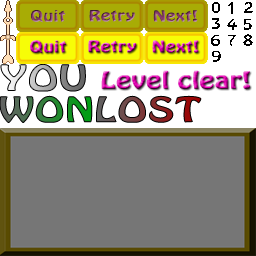
<style>
.page{position:relative;width:256px;height:256px;background:#767676}
.page>*{position:absolute;margin:0}
.t1{font:13.4px "HoboStd";letter-spacing:0.02em;scale:1.33 1}
.t2{font:14.2px "HoboStd";letter-spacing:0.02em;scale:1.33 1}
.t3{font:31.8px "HoboStd";letter-spacing:0.02em;scale:1.32 1}
.t4{font:20.9px "HoboStd";letter-spacing:0.02em;scale:1.33 1}
.t5{font:31px "HoboStd";letter-spacing:0.02em;scale:1.33 1}
</style>
<div class="page">
<p class="t1" style="left:31px;top:10px;width:35px;height:13px">Quit</p>
<p class="t1" style="left:89px;top:10px;width:46px;height:12px">Retry</p>
<p class="t1" style="left:153px;top:10px;width:45px;height:12px">Next!</p>
<p class="t2" style="left:30px;top:40px;width:37px;height:14px">Quit</p>
<p class="t2" style="left:88px;top:40px;width:48px;height:13px">Retry</p>
<p class="t2" style="left:152px;top:40px;width:47px;height:13px">Next!</p>
<p class="t3" style="left:0px;top:63px;width:86px;height:29px">YOU</p>
<p class="t4" style="left:101px;top:70px;width:149px;height:20px">Level clear!</p>
<p class="t5" style="left:0px;top:95px;width:93px;height:28px">WON</p>
<p class="t5" style="left:96px;top:95px;width:106px;height:28px">LOST</p>
</div>
